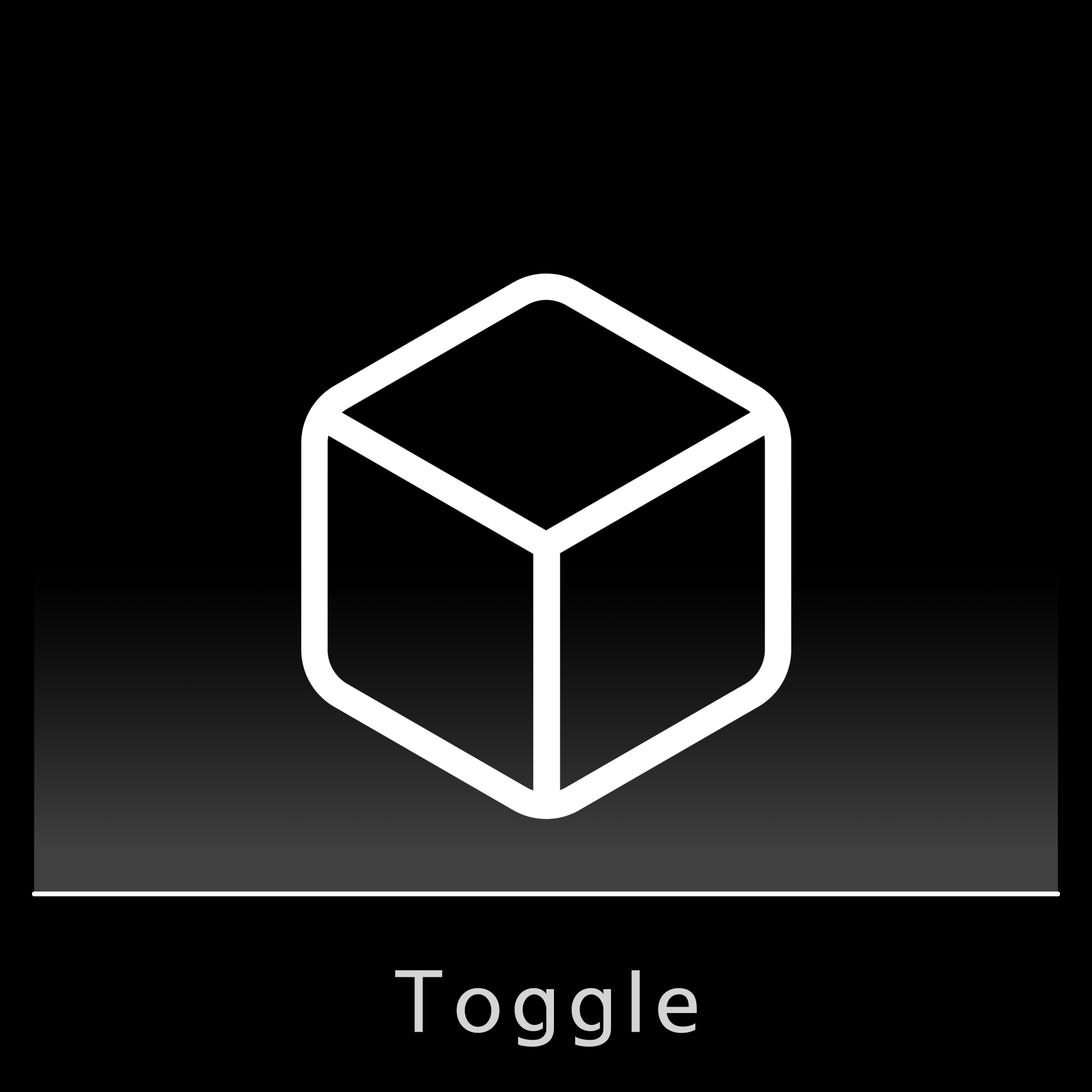
<style>
.page{position:relative;width:1092px;height:1092px;background:#000000}
.page>*{position:absolute;margin:0}
.t1{font:85.3px "SeoulNamsanB";letter-spacing:0.1em;color:#d4d4d4}
</style>
<div class="page">
<p class="t1" style="left:395px;top:970px;width:302px;height:77px">Toggle</p>
</div>
